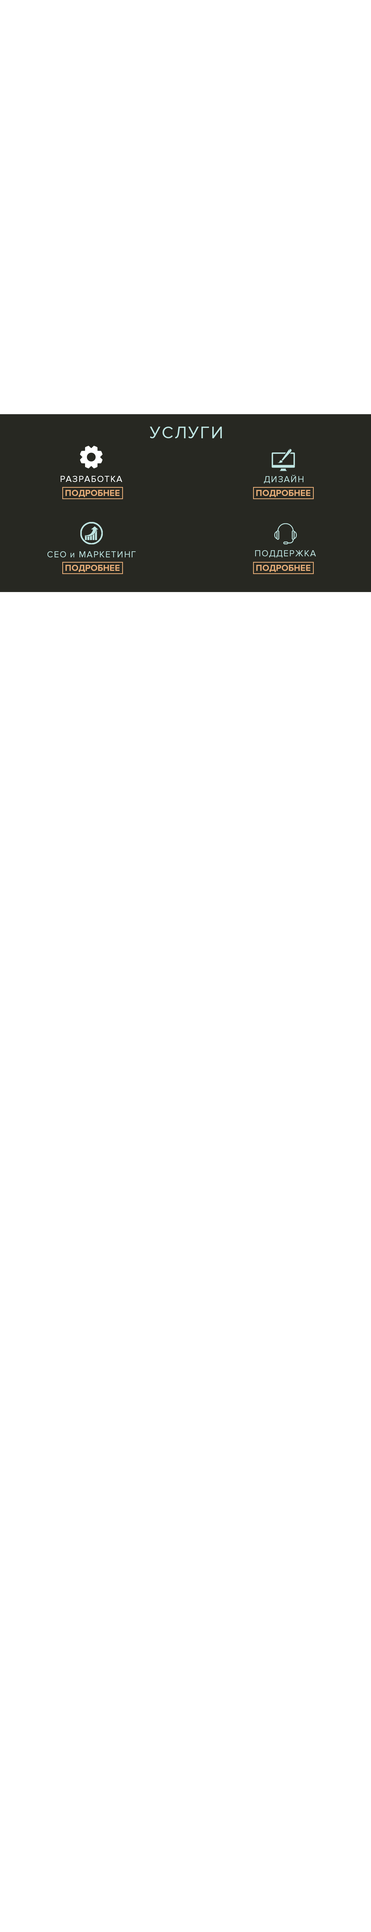
<style>
.page{position:relative;width:371px;height:1932px;background:#ffffff}
.page>*{position:absolute;margin:0}
.t1{font:17.1px "ProximaNova-Regular";letter-spacing:0.075em;color:#bfe5e2}
.t2{font:9px "ProximaNova-Regular";letter-spacing:0.075em;color:#ffffff}
.t3{font:9px "ProximaNova-Regular";letter-spacing:0.075em;color:#bfe5e2}
.t4{font:8.9px "ProximaNova-Bold";color:#e5ac77}
</style>
<div class="page">
<p class="t1" style="left:150px;top:427px;width:72px;height:11px">УСЛУГИ</p>
<p class="t2" style="left:61px;top:476px;width:61px;height:6px">РАЗРАБОТКА</p>
<p class="t2" style="left:61px;top:476px;width:61px;height:6px">РАЗРАБОТКА</p>
<p class="t3" style="left:264px;top:475px;width:39px;height:9px">ДИЗАЙН</p>
<p class="t4" style="left:65px;top:490px;width:54px;height:7px">ПОДРОБНЕЕ</p>
<p class="t4" style="left:256px;top:490px;width:54px;height:7px">ПОДРОБНЕЕ</p>
<p class="t3" style="left:47px;top:551px;width:89px;height:6px">СЕО и МАРКЕТИНГ</p>
<p class="t3" style="left:255px;top:550px;width:61px;height:8px">ПОДДЕРЖКА</p>
<p class="t4" style="left:65px;top:565px;width:54px;height:7px">ПОДРОБНЕЕ</p>
<p class="t4" style="left:256px;top:565px;width:54px;height:7px">ПОДРОБНЕЕ</p>
</div>
